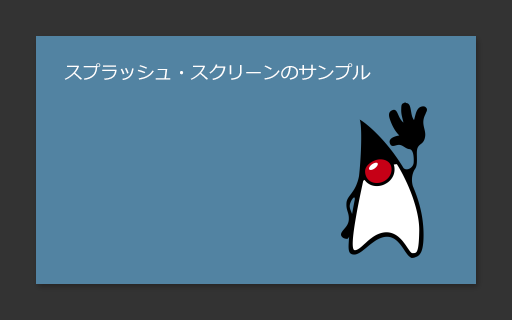
<style>
.page{position:relative;width:512px;height:320px;background:#5283a2}
.page>*{position:absolute;margin:0}
.t1{font:18px "Meiryo";color:#ffffff}
</style>
<div class="page">
<p class="t1" style="left:64px;top:63px;width:307px;height:17px">スプラッシュ・スクリーンのサンプル</p>
</div>
